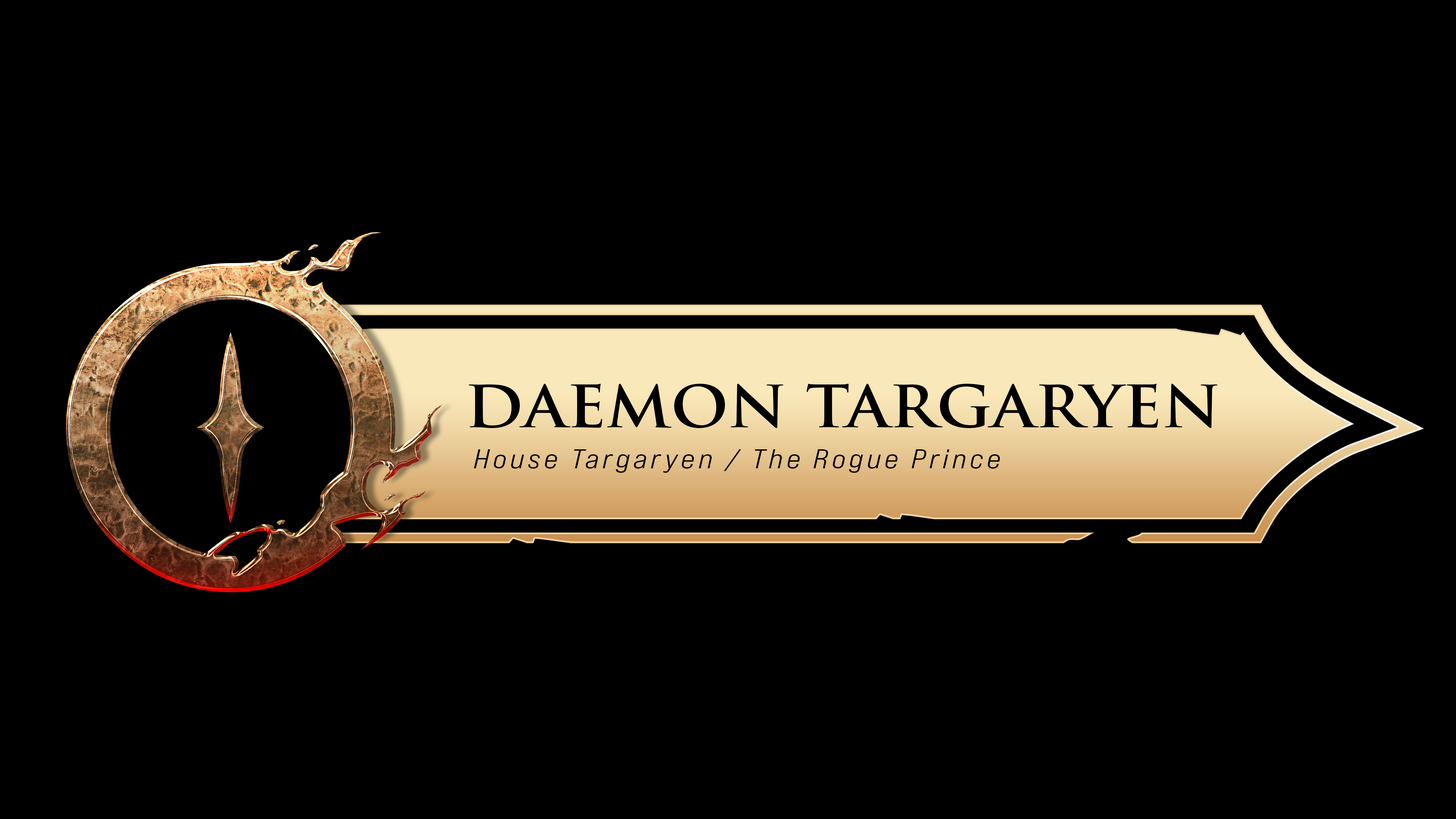
<style>
.page{position:relative;width:1456px;height:819px;background:#000000}
.page>*{position:absolute;margin:0}
.t1{font:56.9px "TrajanPro-Bold";color:#000000;text-transform:uppercase;scale:1.09 1}
.t2{font:27.2px "BebasNeuePro-ExpMdIt";letter-spacing:0.12em;color:#000000;scale:1.09 1}
</style>
<div class="page">
<p class="t1" style="left:469px;top:384px;width:748px;height:44px">daemon targaryen</p>
<p class="t2" style="left:474px;top:449px;width:526px;height:24px">House Targaryen / The Rogue Prince</p>
</div>
